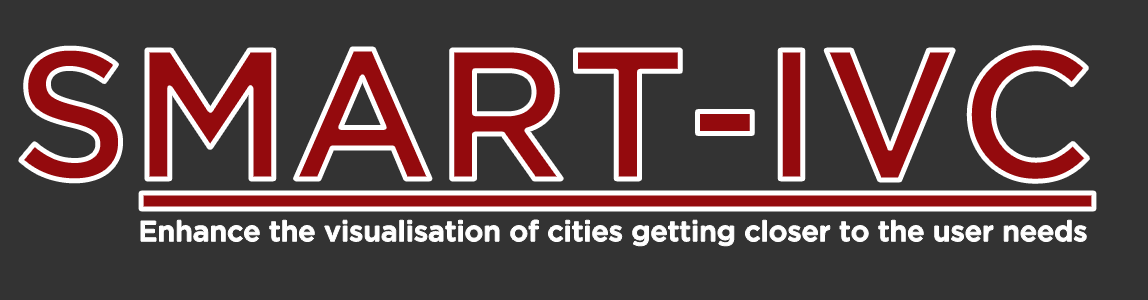
<style>
.page{position:relative;width:1148px;height:300px;background:#333333}
.page>*{position:absolute;margin:0}
.t1{font:183.9px "GothamMedium";color:#940a0d}
.t2{font:28.4px "GothamMedium";color:#ffffff}
</style>
<div class="page">
<p class="t1" style="left:20px;top:47px;width:1068px;height:135px">SMART-IVC</p>
<p class="t2" style="left:141px;top:220px;width:946px;height:26px">Enhance the visualisation of cities getting closer to the user needs</p>
</div>
